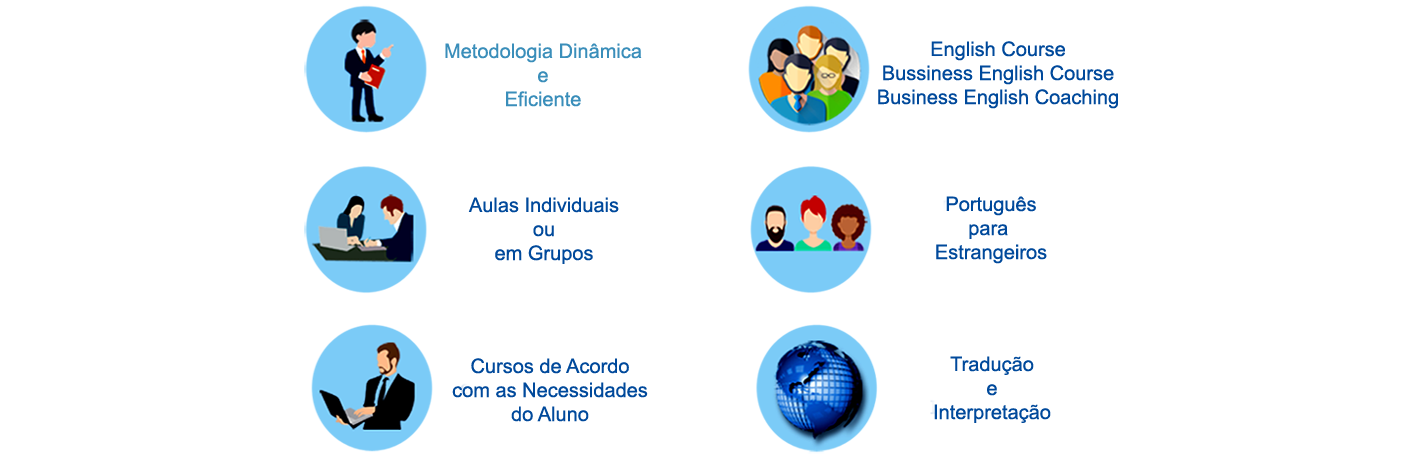
<style>
.page{position:relative;width:1412px;height:469px;background:#ffffff}
.page>*{position:absolute;margin:0}
.t1{font:20px "ArialMT";color:#00499b}
.t2{font:20px "ArialMT";color:#3a8eba}
</style>
<div class="page">
<p class="t1" style="left:878px;top:41px;width:240px;height:68px;text-align:center">English Course<br>Bussiness English Course<br>Business English Coaching</p>
<p class="t2" style="left:445px;top:43px;width:197px;height:64px;text-align:center">Metodologia Dinâmica<br>e<br>Eficiente</p>
<p class="t1" style="left:468px;top:197px;width:151px;height:67px;text-align:center">Aulas Individuais<br>ou<br>em Grupos</p>
<p class="t1" style="left:936px;top:196px;width:111px;height:68px;text-align:center">Português<br>para <br>Estrangeiros</p>
<p class="t1" style="left:452px;top:358px;width:196px;height:64px;text-align:center">Cursos de Acordo<br>com as Necessidades<br>do Aluno</p>
<p class="t1" style="left:934px;top:356px;width:117px;height:67px;text-align:center">Tradução<br>e<br>Interpretação</p>
</div>
